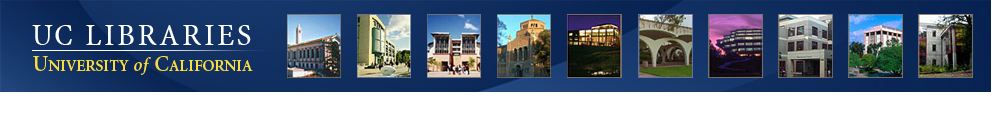
<style>
.page{position:relative;width:1000px;height:128px;background:#ffffff}
.page>*{position:absolute;margin:0}
.t1{font:31px "MinionWebPro";letter-spacing:0.075em;color:#ffffff}
.t2{font:23.1px "Minion-Semibold";letter-spacing:0.02em;color:#f9dc40;font-variant:small-caps;scale:0.95 1}
.t3{font:23.1px "Minion-Semibold";color:#f9dc40;font-variant:small-caps;scale:0.95 1}
.t4{font:18.9px "Minion-SemiboldItalic";color:#f9dc40;scale:0.95 1}
.t5{font:23.1px "Minion-Semibold";letter-spacing:0.022em;color:#f9dc40;font-variant:small-caps;scale:0.95 1}
</style>
<div class="page">
<p class="t1" style="left:32px;top:25px;width:219px;height:20px">UC LIBRARIES</p>
<p class="t2" style="left:33px;top:56px;width:220px;height:19px"><span class="t3">U</span>niversity <span class="t4">of </span>C<span class="t5">alifornia</span></p>
</div>
